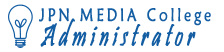
<style>
.page{position:relative;width:224px;height:52px;background:#ffffff}
.page>*{position:absolute;margin:0}
.t1{font:18px "MaiandraGD-Regular";letter-spacing:0.2em;color:#135da3;font-weight:bold;scale:0.77 1}
.t2{font:32.4px "Pristina-Regular";letter-spacing:0.2em;color:#135da3;font-weight:bold;font-style:italic;scale:0.64 1}
.t3{font:32.4px "Pristina-Regular";letter-spacing:0.2em;color:#135da3;text-transform:uppercase;font-weight:bold;font-style:italic;scale:0.64 1}
</style>
<div class="page">
<p class="t1" style="left:39px;top:8px;width:172px;height:18px">JPN MEDIA College</p>
<p class="t2" style="left:40px;top:18px;width:156px;height:29px"><span class="t3">A</span>dministrator</p>
</div>
